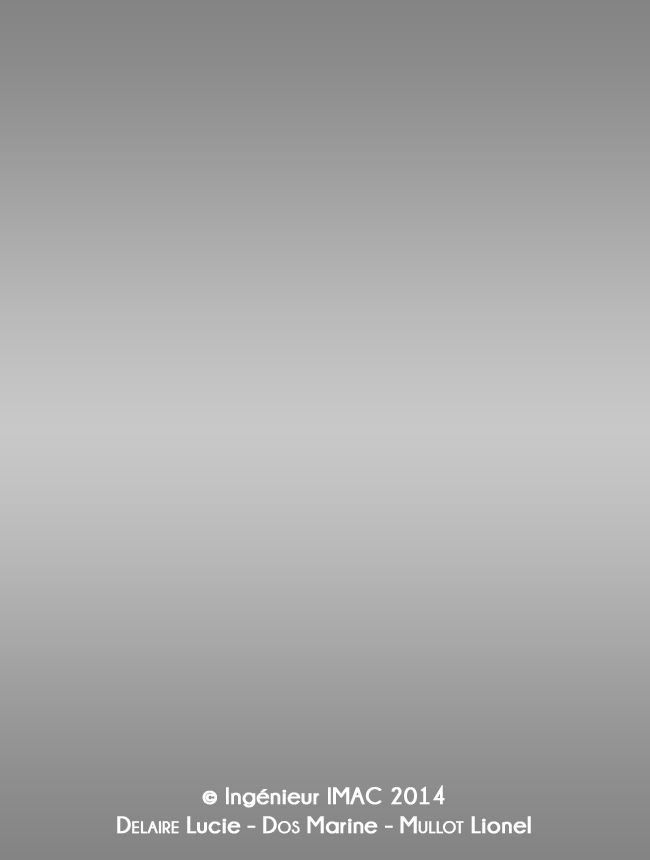
<style>
.page{position:relative;width:650px;height:860px}
.page>*{position:absolute;margin:0}
.t1{font:24px "Champagne&Limousines-Bold";color:#ffffff;font-weight:bold}
.t2{font:24px "Champagne&Limousines-Bold";color:#ffffff;font-variant:small-caps;font-weight:bold}
</style>
<div class="page">
<p class="t1" style="left:117px;top:785px;width:414px;height:49px;text-align:center">© Ingénieur IMAC 2014<br><span class="t2">Delaire </span>Lucie - <span class="t2">Dos </span>Marine - <span class="t2">Mullot </span>Lionel</p>
</div>
